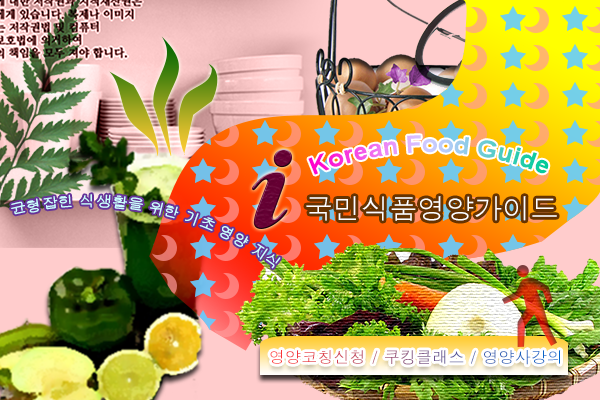
<style>
.page{position:relative;width:600px;height:400px}
.page>*{position:absolute;margin:0}
.t1{font:24px "Arial-BoldMT";letter-spacing:0.01em}
.t2{font:15px "Gulim";letter-spacing:0.01em;color:#ccffff}
.t3{font:28px "Dotum";letter-spacing:0.01em;color:#ffffff}
.t4{font:16px "Dotum";letter-spacing:0.01em}
</style>
<div class="page">
<p class="t1" style="left:308px;top:135px;width:241px;height:40px">Korean Food Guide</p>
<p class="t2" style="left:11px;top:194px;width:270px;height:75px;rotate:12deg">균형잡힌 식생활을 위한 기초 영양 지식</p>
<p class="t3" style="left:306px;top:196px;width:251px;height:25px">국민식품영양가이드</p>
<p class="t4" style="left:270px;top:350px;width:291px;height:15px">영양코칭신청 / 쿠킹클래스 / 영양사강의</p>
</div>
